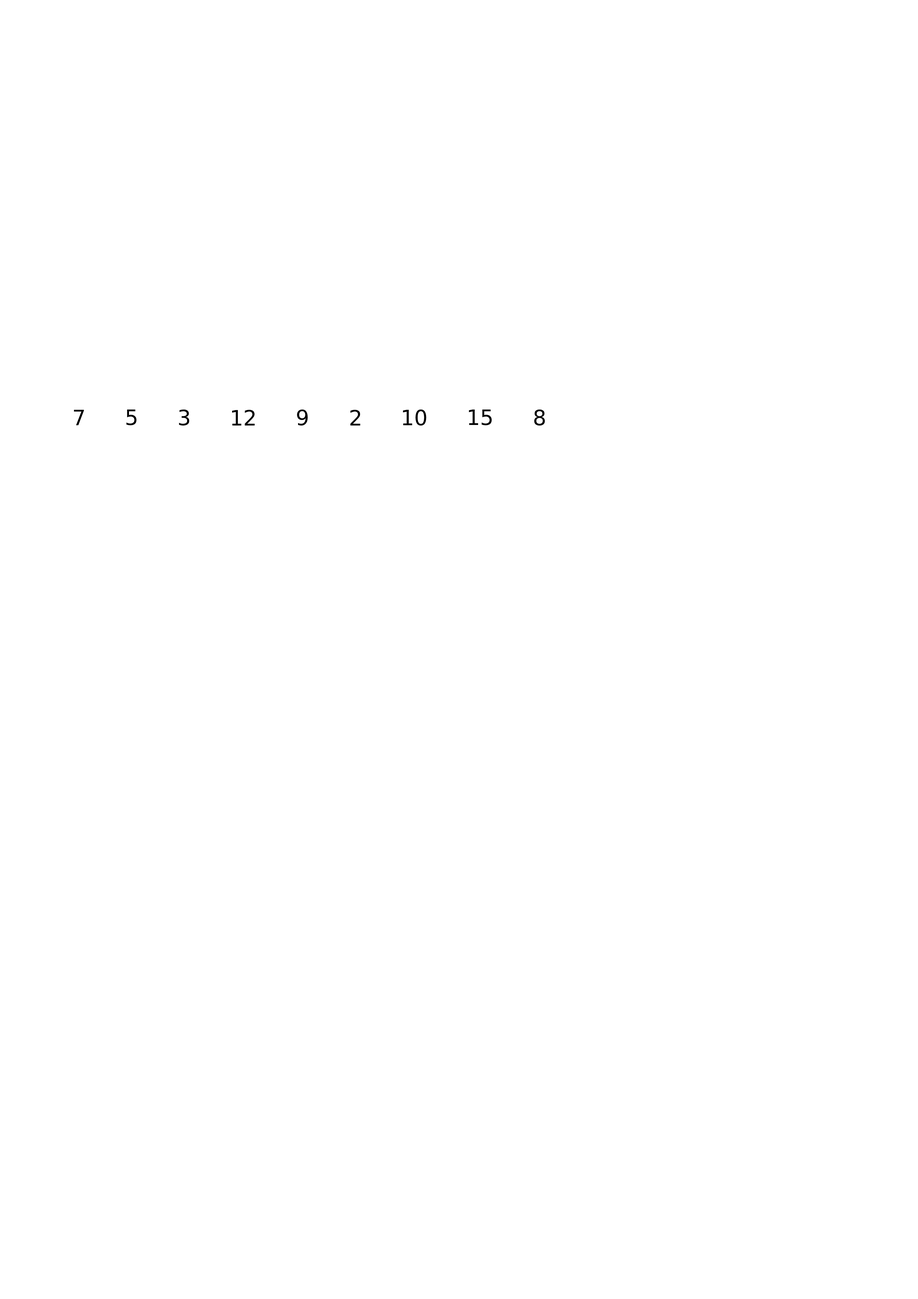
<style>
.page{position:relative;width:918px;height:1299px;background:#ffffff}
.page>*{position:absolute;margin:0}
.t1{font:21.2px "DejaVuSans";color:#000000}
</style>
<div class="page">
<p class="t1" style="left:74px;top:409px;width:10px;height:16px">7</p>
<p class="t1" style="left:126px;top:409px;width:11px;height:16px">5</p>
<p class="t1" style="left:179px;top:409px;width:11px;height:17px">3</p>
<p class="t1" style="left:232px;top:409px;width:23px;height:16px">12</p>
<p class="t1" style="left:297px;top:409px;width:11px;height:17px">9</p>
<p class="t1" style="left:350px;top:409px;width:10px;height:16px">2</p>
<p class="t1" style="left:403px;top:409px;width:23px;height:17px">10</p>
<p class="t1" style="left:469px;top:409px;width:23px;height:16px">15</p>
<p class="t1" style="left:534px;top:409px;width:11px;height:17px">8</p>
</div>
